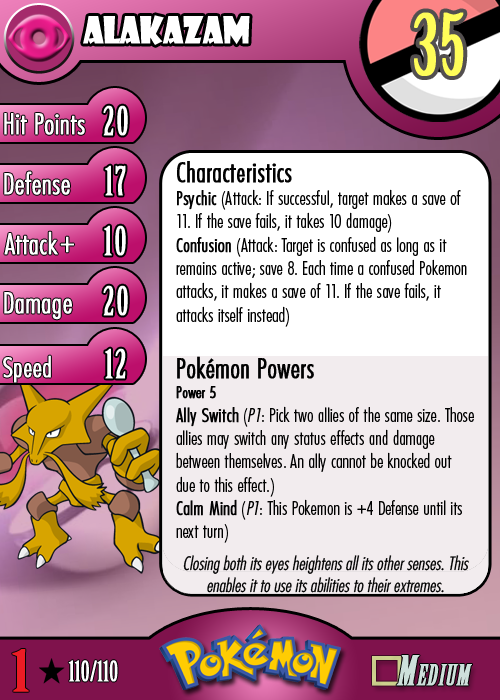
<style>
.page{position:relative;width:500px;height:700px}
.page>*{position:absolute;margin:0}
.t1{font:36.7px "ShowcardGothic-Reg";letter-spacing:-0.025em;color:#ffffff;scale:0.91 1}
.t2{font:83.3px "BirchStd";letter-spacing:0.025em;color:#fffd59;font-weight:bold}
.t3{font:27.8px "Futura-CondensedLight";color:#ffffff;font-weight:bold}
.t4{font:38.9px "BirchStd";letter-spacing:0.035em;color:#ffffff;font-weight:bold}
.t5{font:19.4px "FuturaCondensedBQ-Light";color:#010101}
.t6{font:27.8px "FuturaCondensedBQ-Light";color:#010101;font-weight:bold}
.t7{font:19.4px "FuturaCondensedBQ-Light";color:#010101;font-weight:bold}
.t8{font:16.7px "FuturaCondensedBQ-Light";color:#010101;font-weight:bold}
.t9{font:19.4px "FuturaCondensedBQ-Light";color:#010101;font-style:italic}
.t10{font:30.6px "Futura-CondensedLight";color:#ffffff;font-weight:bold}
.t11{font:27.8px "FuturaCondensedBQ-Light";color:#ffffff;font-weight:bold}
.t12{font:18.1px "Futura-CondensedLight";color:#010101;font-style:italic}
.t13{font:55.6px "BirchStd";color:#ed1c24;font-weight:bold;scale:1.5 1}
.t14{font:27.8px "BirchStd";color:#ffffff;font-weight:bold}
</style>
<div class="page">
<p class="t1" style="left:83px;top:15px;width:167px;height:30px">Alakazam</p>
<p class="t2" style="left:414px;top:12px;width:50px;height:64px">35</p>
<p class="t3" style="left:4px;top:113px;width:81px;height:22px">Hit Points</p>
<p class="t4" style="left:103px;top:105px;width:25px;height:31px">20</p>
<p class="t5" style="left:176px;top:161px;width:298px;height:382px"><span class="t6">Characteristics<br></span><span class="t7">Psychic</span> (Attack: If successful, target makes a save of 11. If the save fails, it takes 10 damage)<br><span class="t7">Confusion</span> (Attack: Target is confused as long as it remains active; save 8. Each time a confused Pokemon attacks, it makes a save of 11. If the save fails, it attacks itself instead)<br><br><span class="t6">Pokémon Powers<br></span><span class="t8">Power 5<br></span><span class="t7">Ally Switch</span> (<span class="t9">P1</span>: Pick two allies of the same size. Those allies may switch any status effects and damage between themselves. An ally cannot be knocked out due to this effect.)<br><span class="t7">Calm Mind</span> (<span class="t9">P1</span>: This Pokemon is +4 Defense until its next turn)</p>
<p class="t3" style="left:4px;top:171px;width:66px;height:24px">Defense</p>
<p class="t4" style="left:105px;top:165px;width:21px;height:31px">17</p>
<p class="t3" style="left:4px;top:231px;width:54px;height:24px">Attack</p>
<p class="t4" style="left:104px;top:225px;width:22px;height:31px">10</p>
<p class="t10" style="left:60px;top:236px;width:14px;height:17px">+</p>
<p class="t3" style="left:4px;top:292px;width:68px;height:28px">Damage</p>
<p class="t4" style="left:103px;top:285px;width:25px;height:31px">20</p>
<p class="t4" style="left:105px;top:348px;width:21px;height:31px">12</p>
<p class="t11" style="left:3px;top:355px;width:48px;height:28px">Speed</p>
<p class="t12" style="left:183px;top:555px;width:286px;height:38px;text-align:center">Closing both its eyes heightens all its other senses. This enables it to use its abilities to their extremes.</p>
<p class="t13" style="left:12px;top:649px;width:17px;height:43px">1</p>
<p class="t14" style="left:68px;top:660px;width:50px;height:22px">110/110</p>
</div>
